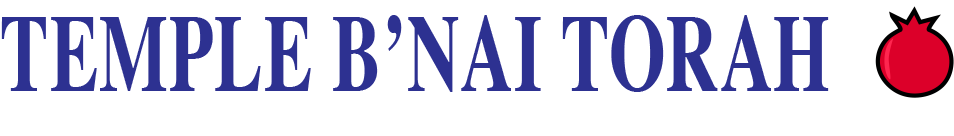
<style>
.page{position:relative;width:954px;height:136px;background:#ffffff}
.page>*{position:absolute;margin:0}
.t1{font:108.4px "Times-Bold";letter-spacing:0.011em;color:#2e3191;scale:0.67 1}
</style>
<div class="page">
<p class="t1" style="left:1px;top:15px;width:828px;height:77px">TEMPLE B’NAI TORAH</p>
</div>
